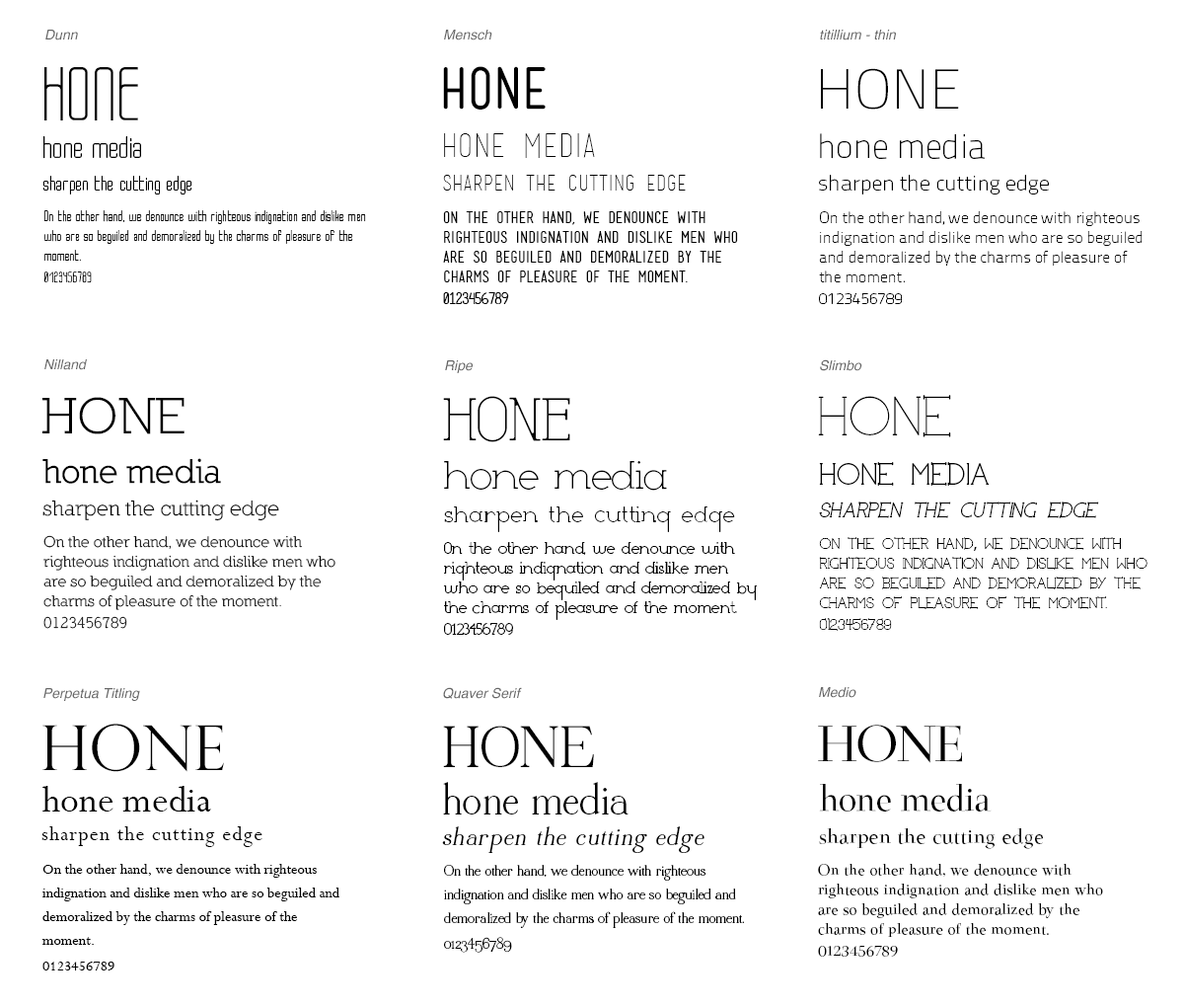
<style>
.page{position:relative;width:1184px;height:1007px;background:#ffffff}
.page>*{position:absolute;margin:0}
.t1{font:13.8px "Helvetica-Oblique";color:#666666}
.t2{font:82.9px "Dunn-Regular";color:#000000;text-transform:uppercase}
.t3{font:56.3px "MenschRegular";color:#000000;text-transform:uppercase}
.t4{font:56.3px "TitilliumText25L-1wt";color:#000000;text-transform:uppercase}
.t5{font:33.6px "Dunn-Regular";color:#000000}
.t6{font:33.6px "MenschThin";color:#000000}
.t7{font:33.6px "TitilliumTitle20";color:#000000}
.t8{font:21.7px "Dunn-Regular";color:#000000}
.t9{font:21.7px "MenschThin";color:#000000}
.t10{font:21.7px "TitilliumTitle20";color:#000000}
.t11{font:15.8px/19.7px "Dunn-Regular";color:#000000}
.t12{font:15.8px/19.7px "MenschRegular";color:#000000}
.t13{font:15.8px/19.7px "TitilliumTitle20";color:#000000}
.t14{font:52.3px "Nilland";color:#000000;text-transform:uppercase}
.t15{font:60.2px "Ripe-Light";color:#000000;text-transform:uppercase}
.t16{font:56.3px "SlimboMedium|boodas.de";color:#000000;text-transform:uppercase}
.t17{font:34.5px "Nilland-Bold";color:#000000}
.t18{font:39.5px "Ripe-Light";color:#000000}
.t19{font:31.6px "SlimboBold|boodas.de";color:#000000}
.t20{font:21.7px "Nilland";color:#000000}
.t21{font:21.7px "Ripe-Light";letter-spacing:0.06em;color:#000000}
.t22{font:21.7px "SlimboBold|boodas.de";color:#000000;font-style:italic}
.t23{font:15.8px/19.7px "Nilland";color:#000000}
.t24{font:15.8px/19.7px "Ripe";color:#000000}
.t25{font:15.8px/19.7px "SlimboMedium|boodas.de";color:#000000}
.t26{font:15.8px/19.7px "MyriadPro-Regular";color:#000000}
.t27{font:62.2px "PerpetuaTitlingMT-Light";color:#000000;text-transform:uppercase}
.t28{font:62.2px "QuaverSerif";color:#000000;text-transform:uppercase}
.t29{font:54.3px "Medio";letter-spacing:-0.04em;color:#000000;text-transform:uppercase}
.t30{font:40.5px "Perpetua";color:#000000}
.t31{font:46.4px "QuaverSerif";color:#000000}
.t32{font:37.5px "Medio";letter-spacing:-0.04em;color:#000000}
.t33{font:21.7px "Perpetua";letter-spacing:0.06em;color:#000000}
.t34{font:26.6px "QuaverSerif";letter-spacing:0.06em;color:#000000;font-style:italic}
.t35{font:21.7px "Medio";color:#000000}
.t36{font:15.8px/23.7px "Perpetua";color:#000000}
.t37{font:15.8px/23.7px "QuaverSerif";color:#000000}
.t38{font:15.8px/19.7px "Medio";color:#000000}
</style>
<div class="page">
<p class="t1" style="left:45px;top:30px;width:33px;height:10px">Dunn</p>
<p class="t1" style="left:444px;top:30px;width:49px;height:10px">Mensch</p>
<p class="t1" style="left:820px;top:30px;width:76px;height:10px">titillium - thin</p>
<p class="t2" style="left:44px;top:67px;width:94px;height:53px">hone</p>
<p class="t3" style="left:443px;top:66px;width:103px;height:44px">hone</p>
<p class="t4" style="left:821px;top:68px;width:138px;height:42px">hone</p>
<p class="t5" style="left:43px;top:136px;width:98px;height:23px">hone media</p>
<p class="t6" style="left:444px;top:133px;width:151px;height:25px">hone media</p>
<p class="t7" style="left:820px;top:133px;width:165px;height:26px">hone media</p>
<p class="t8" style="left:42px;top:176px;width:150px;height:18px">sharpen the cutting edge</p>
<p class="t9" style="left:443px;top:175px;width:243px;height:15px">sharpen the cutting edge</p>
<p class="t10" style="left:819px;top:175px;width:230px;height:19px">sharpen the cutting edge</p>
<p class="t11" style="left:43px;top:210px;width:323px;height:73px">On the other hand, we denounce with righteous indignation and dislike men who are so beguiled and demoralized by the charms of pleasure of the moment.<br>0123456789</p>
<p class="t12" style="left:443px;top:211px;width:295px;height:93px">On the other hand, we denounce with righteous indignation and dislike men who are so beguiled and demoralized by the charms of pleasure of the moment.<br>0123456789</p>
<p class="t13" style="left:819px;top:211px;width:324px;height:93px">On the other hand, we denounce with righteous indignation and dislike men who are so beguiled and demoralized by the charms of pleasure of the moment.<br>0123456789</p>
<p class="t1" style="left:44px;top:359px;width:43px;height:11px">Nilland</p>
<p class="t1" style="left:445px;top:360px;width:28px;height:13px">Ripe</p>
<p class="t1" style="left:820px;top:359px;width:43px;height:12px">Slimbo</p>
<p class="t14" style="left:42px;top:397px;width:143px;height:37px">hone</p>
<p class="t15" style="left:443px;top:396px;width:127px;height:46px">hone</p>
<p class="t16" style="left:818px;top:395px;width:133px;height:42px">hone</p>
<p class="t17" style="left:42px;top:458px;width:179px;height:26px">hone media</p>
<p class="t18" style="left:444px;top:461px;width:223px;height:30px">hone media</p>
<p class="t19" style="left:819px;top:462px;width:171px;height:24px">hone media</p>
<p class="t20" style="left:42px;top:499px;width:237px;height:22px">sharpen the cutting edge</p>
<p class="t21" style="left:444px;top:506px;width:291px;height:26px">sharpen the cutting edge</p>
<p class="t22" style="left:819px;top:501px;width:281px;height:17px">sharpen the cutting edge</p>
<p class="t23" style="left:43px;top:535px;width:293px;height:94px">On the other hand, we denounce with righteous indignation and dislike men who are so beguiled and demoralized by the charms of pleasure of the moment.<br>0123456789</p>
<p class="t24" style="left:443px;top:542px;width:315px;height:93px">On the other hand, we denounce with righteous indignation and dislike men who are so beguiled and demoralized by the charms of pleasure of the moment.<br>0123456789</p>
<p class="t25" style="left:819px;top:537px;width:329px;height:94px">On the other hand<span class="t26">,</span> we denounce with righteous indignation and dislike men who are so beguiled and demoralized by the charms of pleasure of the moment.<br>0123456789</p>
<p class="t1" style="left:43px;top:688px;width:97px;height:13px">Perpetua Titling</p>
<p class="t1" style="left:443px;top:687px;width:79px;height:12px">Quaver Serif</p>
<p class="t1" style="left:819px;top:687px;width:38px;height:11px">Medio</p>
<p class="t27" style="left:42px;top:723px;width:182px;height:49px">hone</p>
<p class="t28" style="left:443px;top:725px;width:151px;height:42px">hone</p>
<p class="t29" style="left:818px;top:724px;width:145px;height:39px">hone</p>
<p class="t30" style="left:42px;top:786px;width:169px;height:25px">hone media</p>
<p class="t31" style="left:443px;top:782px;width:186px;height:32px">hone media</p>
<p class="t32" style="left:819px;top:784px;width:173px;height:27px">hone media</p>
<p class="t33" style="left:41px;top:826px;width:222px;height:21px">sharpen the cutting edge</p>
<p class="t34" style="left:442px;top:826px;width:263px;height:27px">sharpen the cutting edge</p>
<p class="t35" style="left:819px;top:828px;width:224px;height:21px">sharpen the cutting edge</p>
<p class="t36" style="left:42px;top:864px;width:298px;height:106px">On the other hand, we denounce with righteous indignation and dislike men who are so beguiled and demoralized by the charms of pleasure of the moment.<br>0123456789</p>
<p class="t37" style="left:444px;top:865px;width:300px;height:87px">On the other hand, we denounce with righteous indignation and dislike men who are so beguiled and demoralized by the charms of pleasure of the moment.<br>0123456789</p>
<p class="t38" style="left:818px;top:864px;width:285px;height:92px">On the other hand, we denounce with righteous indignation and dislike men who are so beguiled and demoralized by the charms of pleasure of the moment.<br>0123456789</p>
</div>
